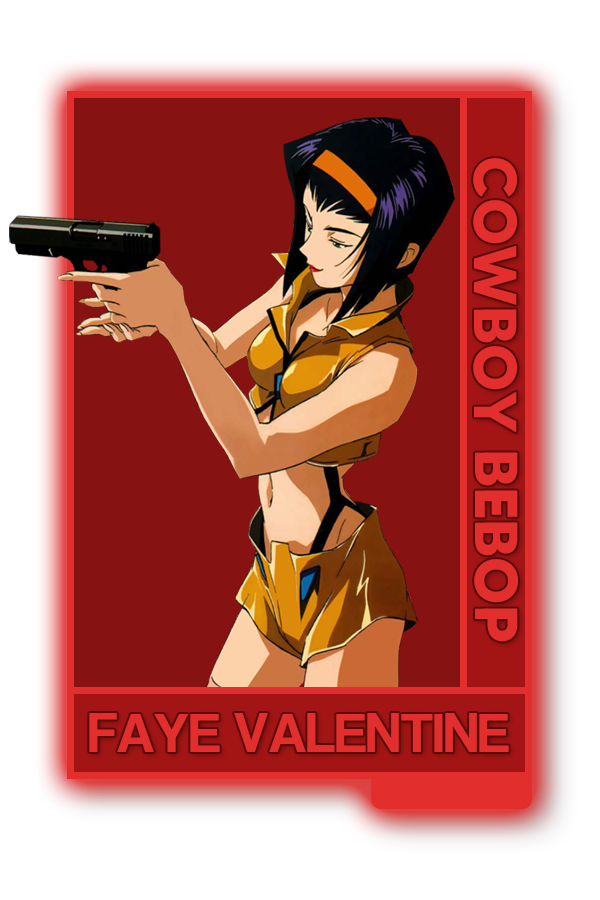
<style>
.page{position:relative;width:600px;height:900px;background:#861211}
.page>*{position:absolute;margin:0}
.t1{font:60.5px "MADETOMMY-Bold";color:#e22f2e}
.t2{font:58.1px "CoolveticaRg-Regular";color:#e22f2e}
</style>
<div class="page">
<p class="t1" style="left:473px;top:158px;width:45px;height:484px;rotate:90deg">COWBOY BEBOP</p>
<p class="t2" style="left:89px;top:713px;width:420px;height:39px">FAYE VALENTINE</p>
</div>
